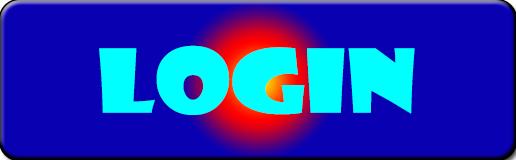
<style>
.page{position:relative;width:516px;height:160px;background:#0900b1}
.page>*{position:absolute;margin:0}
.t1{font:85.7px "ShowcardGothic-Reg";color:#00ffff;scale:1.28 1}
</style>
<div class="page">
<p class="t1" style="left:99px;top:45px;width:316px;height:70px">login</p>
</div>
